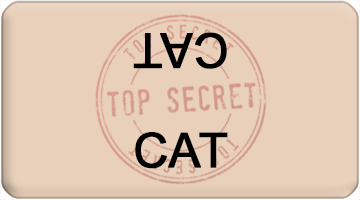
<style>
.page{position:relative;width:360px;height:200px;background:#e8d0bb}
.page>*{position:absolute;margin:0}
.t1{font:48px "ArialMT";color:#000000;font-weight:bold}
</style>
<div class="page">
<p class="t1" style="left:133px;top:32px;width:94px;height:37px;rotate:180deg">CAT</p>
<p class="t1" style="left:135px;top:132px;width:93px;height:37px">CAT</p>
</div>
